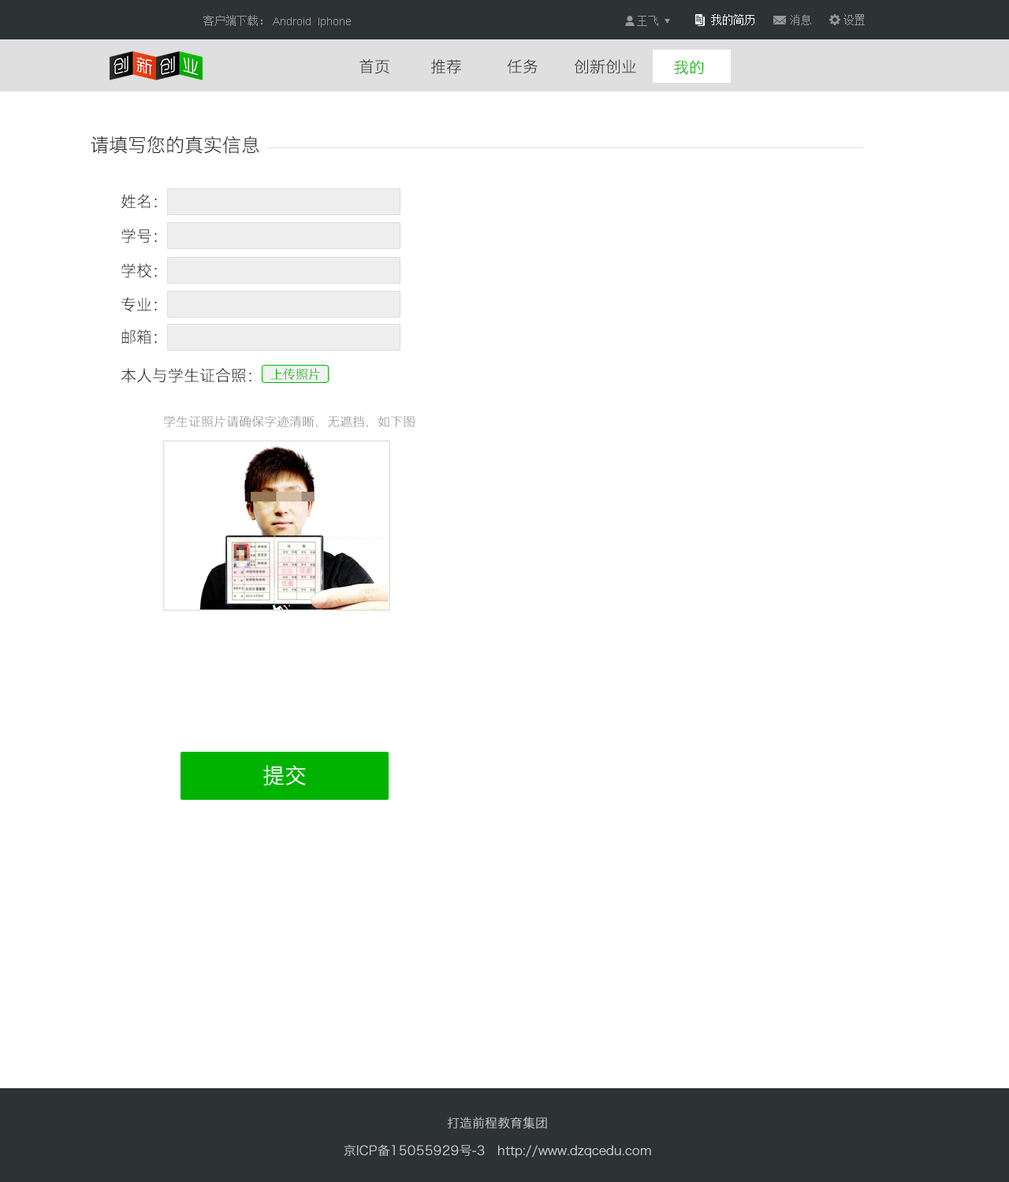
<style>
.page{position:relative;width:1009px;height:1182px;background:#ffffff}
.page>*{position:absolute;margin:0}
.t1{font:11px "SimSun";color:#999999}
.t2{font:11px "ArialMT";color:#999999}
.t3{font:11px "SimSun";color:#ffffff}
.t4{font:15.8px "HiraginoSansGB-W3";color:#333333}
.t5{font:15.8px "HiraginoSansGB-W3";color:#2d3235}
.t6{font:15.8px "HiraginoSansGB-W3";color:#03ab02}
.t7{font:18.9px "HiraginoSansGB-W3";color:#333333}
.t8{font:12.6px "HiraginoSansGB-W3";color:#00b300}
.t9{font:12.6px "HiraginoSansGB-W3";color:#999999}
.t10{font:22.1px "HiraginoSansGB-W3";color:#ffffff}
.t11{font:12.6px "HiraginoSansGB-W3";color:#cccccc}
</style>
<div class="page">
<p class="t1" style="left:203px;top:15px;width:59px;height:11px">客户端下载：</p>
<p class="t2" style="left:273px;top:17px;width:78px;height:11px">Android  Iphone</p>
<p class="t1" style="left:637px;top:16px;width:21px;height:10px">王飞</p>
<p class="t3" style="left:711px;top:14px;width:43px;height:11px">我的简历</p>
<p class="t1" style="left:790px;top:14px;width:21px;height:11px">消息</p>
<p class="t1" style="left:843px;top:14px;width:22px;height:11px">设置</p>
<p class="t4" style="left:359px;top:59px;width:30px;height:15px">首页</p>
<p class="t4" style="left:431px;top:59px;width:30px;height:15px">推荐</p>
<p class="t4" style="left:507px;top:59px;width:30px;height:15px">任务</p>
<p class="t5" style="left:574px;top:59px;width:62px;height:15px">创新创业</p>
<p class="t6" style="left:674px;top:60px;width:30px;height:15px">我的</p>
<p class="t7" style="left:91px;top:136px;width:168px;height:18px">请填写您的真实信息</p>
<p class="t4" style="left:121px;top:194px;width:36px;height:15px">姓名：</p>
<p class="t4" style="left:121px;top:229px;width:36px;height:15px">学号：</p>
<p class="t4" style="left:121px;top:263px;width:36px;height:15px">学校：</p>
<p class="t4" style="left:121px;top:297px;width:36px;height:15px">专业：</p>
<p class="t4" style="left:121px;top:329px;width:36px;height:15px">邮箱：</p>
<p class="t4" style="left:121px;top:368px;width:130px;height:15px">本人与学生证合照：</p>
<p class="t8" style="left:270px;top:368px;width:50px;height:13px">上传照片</p>
<p class="t9" style="left:164px;top:415px;width:251px;height:13px">学生证照片请确保字迹清晰，无遮挡，如下图</p>
<p class="t10" style="left:263px;top:765px;width:43px;height:21px">提交</p>
<p class="t11" style="left:447px;top:1117px;width:100px;height:12px">打造前程教育集团</p>
<p class="t11" style="left:344px;top:1144px;width:307px;height:14px">京ICP备15055929号-3   http://www.dzqcedu.com</p>
</div>
